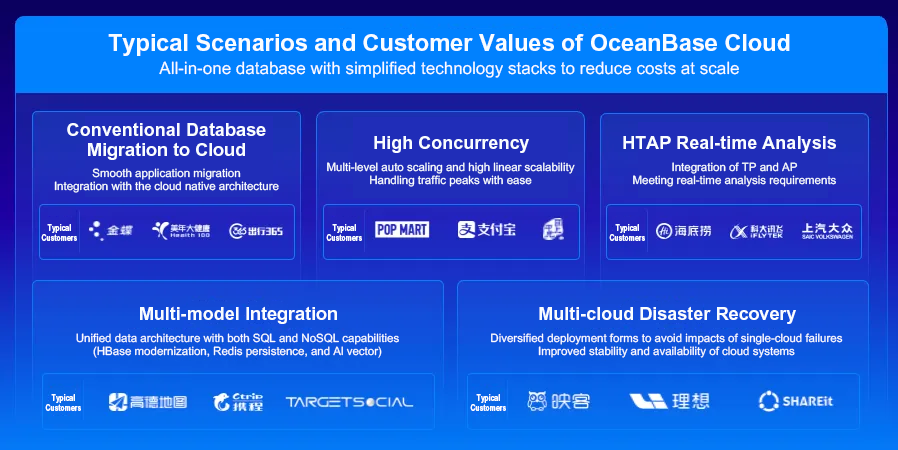
<style>
.page{position:relative;width:898px;height:450px}
.page>*{position:absolute;margin:0}
.t1{font:23.5px "Arial-BoldMT";color:#f9fdff}
.t2{font:17px "ArialMT";color:#f9fdff}
.t3{font:18px/19.8px "Arial-BoldMT";color:#f9fdff}
.t4{font:18px "Arial-BoldMT";color:#f9fdff}
.t5{font:11.5px/13.6px "ArialMT";color:#f9fdff}
.t6{font:8.9px/10.7px "Arial-BoldMT";color:#f9fdff;scale:0.77 1}
</style>
<div class="page">
<p class="t1" style="left:108px;top:33px;width:682px;height:23px">Typical Scenarios and Customer Values of OceanBase Cloud</p>
<p class="t2" style="left:159px;top:61px;width:580px;height:17px">All-in-one database with simplified technology stacks to reduce costs at scale</p>
<p class="t3" style="left:67px;top:122px;width:199px;height:38px;text-align:center">Conventional Database<br>Migration to Cloud</p>
<p class="t4" style="left:374px;top:136px;width:155px;height:17px">High Concurrency</p>
<p class="t4" style="left:623px;top:135px;width:213px;height:18px">HTAP Real-time Analysis</p>
<p class="t5" style="left:54px;top:168px;width:225px;height:25px;text-align:center">Smooth application migration<br>Integration with the cloud native architecture</p>
<p class="t5" style="left:327px;top:162px;width:248px;height:25px;text-align:center">Multi-level auto scaling and high linear scalability<br>Handling traffic peaks with ease</p>
<p class="t5" style="left:633px;top:162px;width:203px;height:25px;text-align:center">Integration of TP and AP<br>Meeting real-time analysis requirements</p>
<p class="t6" style="left:41px;top:224px;width:36px;height:17px;text-align:center">Typical<br>Customers</p>
<p class="t6" style="left:326px;top:224px;width:36px;height:17px;text-align:center">Typical<br>Customers</p>
<p class="t6" style="left:609px;top:224px;width:36px;height:17px;text-align:center">Typical<br>Customers</p>
<p class="t4" style="left:140px;top:306px;width:197px;height:18px">Multi-model Integration</p>
<p class="t4" style="left:539px;top:306px;width:257px;height:18px">Multi-cloud Disaster Recovery</p>
<p class="t5" style="left:76px;top:333px;width:323px;height:25px;text-align:center">Unified data architecture with both SQL and NoSQL capabilities<br>(HBase modernization, Redis persistence, and Al vector)</p>
<p class="t5" style="left:491px;top:333px;width:352px;height:25px;text-align:center">Diversified deployment forms to avoid impacts of single-cloud failures<br>Improved stability and availability of cloud systems</p>
<p class="t6" style="left:45px;top:394px;width:36px;height:17px;text-align:center">Typical<br>Customers</p>
<p class="t6" style="left:470px;top:394px;width:36px;height:17px;text-align:center">Typical<br>Customers</p>
</div>
